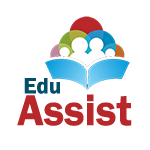
<style>
.page{position:relative;width:150px;height:150px;background:#ffffff}
.page>*{position:absolute;margin:0}
.t1{font:23px "FranklinGothic-Demi";color:#034e69}
.t2{font:44.9px "FranklinGothic-Demi";color:#b8272a;scale:0.96 1}
</style>
<div class="page">
<p class="t1" style="left:24px;top:78px;width:36px;height:16px">Edu</p>
<p class="t2" style="left:17px;top:94px;width:115px;height:32px">Assist</p>
</div>
